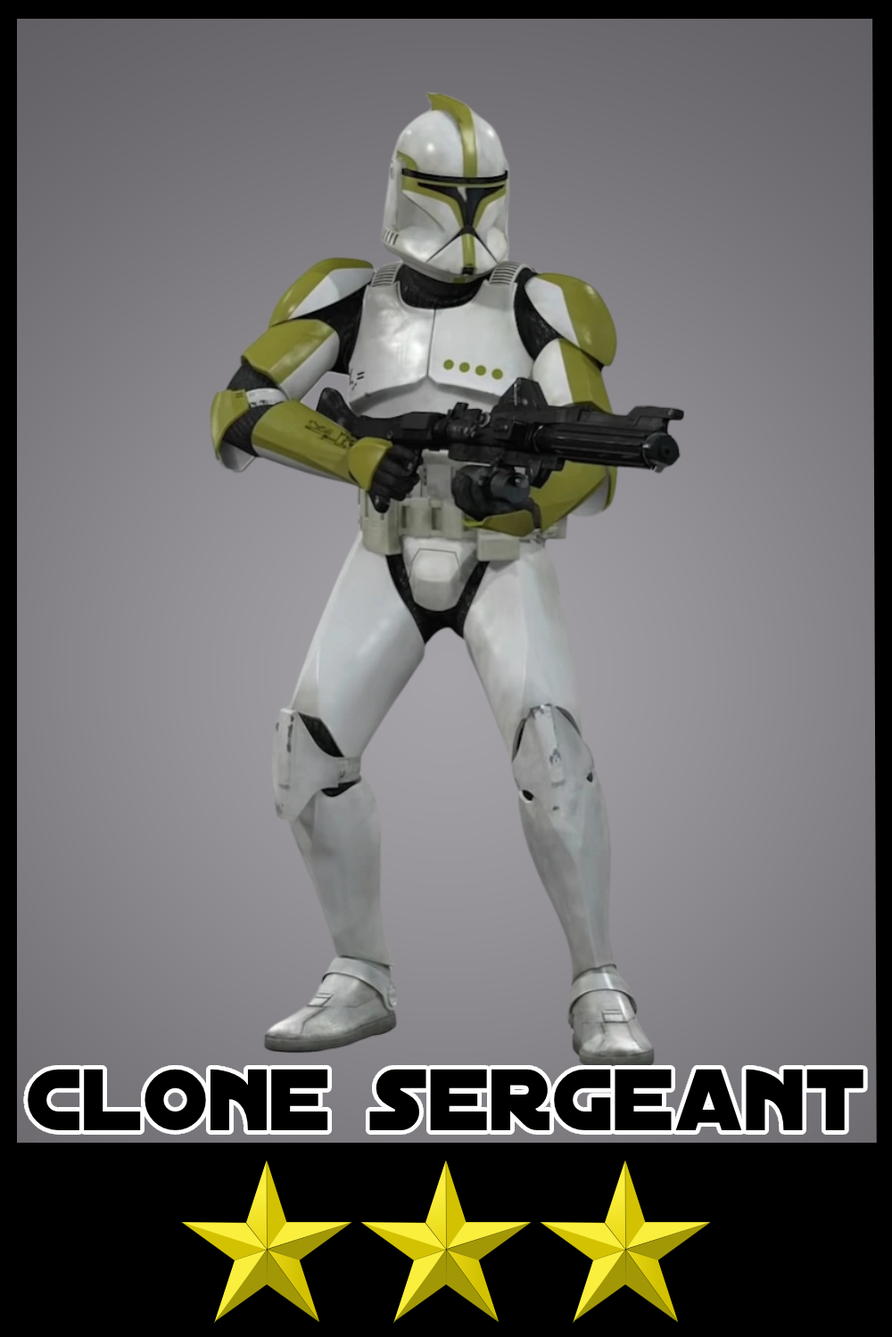
<style>
.page{position:relative;width:892px;height:1337px}
.page>*{position:absolute;margin:0}
.t1{font:93.6px "DistantGalaxy";color:#000000}
</style>
<div class="page">
<p class="t1" style="left:28px;top:1069px;width:835px;height:62px">clone sergeant</p>
</div>
